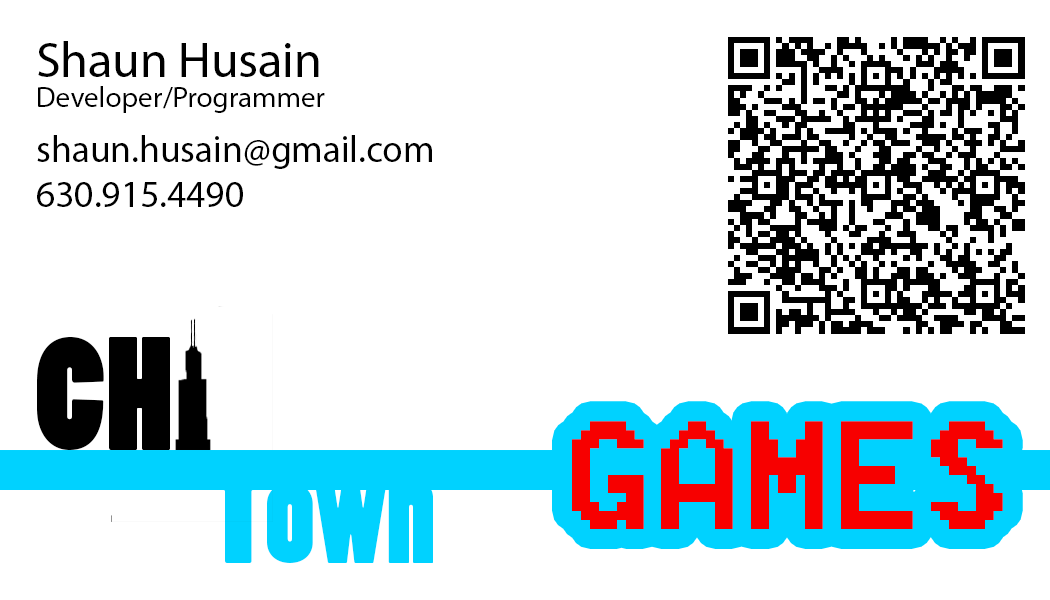
<style>
.page{position:relative;width:1050px;height:600px;background:#ffffff}
.page>*{position:absolute;margin:0}
.t1{font:50px "MyriadPro-Regular";color:#000000}
.t2{font:29.2px "MyriadPro-Regular";color:#000000}
.t3{font:37.5px "MyriadPro-Regular";color:#000000}
.t4{font:150px "PoplarStd";color:#000000}
.t5{font:191.7px "8514oem";color:#f70000}
.t6{font:133.3px "PoplarStd";color:#00d2ff}
</style>
<div class="page">
<p class="t1" style="left:38px;top:41px;width:281px;height:36px">Shaun Husain</p>
<p class="t2" style="left:38px;top:86px;width:287px;height:27px">Developer/Programmer</p>
<p class="t3" style="left:37px;top:135px;width:395px;height:72px">shaun.husain@gmail.com<br>630.915.4490</p>
<p class="t4" style="left:37px;top:337px;width:133px;height:113px">CH</p>
<p class="t5" style="left:572px;top:421px;width:431px;height:108px">GAMES</p>
<p class="t6" style="left:208px;top:463px;width:225px;height:100px">Town</p>
</div>
